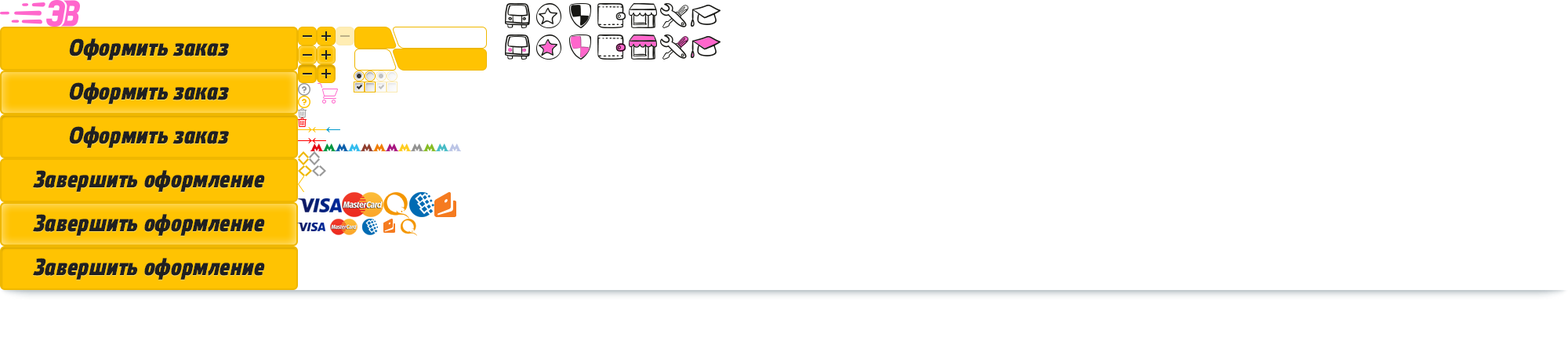
<style>
.page{position:relative;width:1568px;height:348px;background:#ffffff}
.page>*{position:absolute;margin:0}
.t1{font:23.5px "EtelkaNarrowMedium-BoldItalic";letter-spacing:0.025em;color:#202020}
</style>
<div class="page">
<p class="t1" style="left:69px;top:38px;width:160px;height:22px">Оформить заказ</p>
<p class="t1" style="left:69px;top:82px;width:160px;height:22px">Оформить заказ</p>
<p class="t1" style="left:69px;top:126px;width:160px;height:22px">Оформить заказ</p>
<p class="t1" style="left:33px;top:170px;width:232px;height:22px">Завершить оформление</p>
<p class="t1" style="left:33px;top:214px;width:232px;height:22px">Завершить оформление</p>
<p class="t1" style="left:33px;top:258px;width:232px;height:22px">Завершить оформление</p>
</div>
